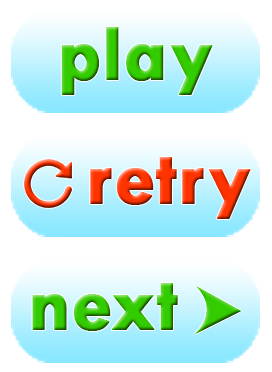
<style>
.page{position:relative;width:272px;height:372px;background:#ffffff}
.page>*{position:absolute;margin:0}
.t1{font:80px "TwCenMT-Bold";font-weight:bold}
</style>
<div class="page">
<p class="t1" style="left:61px;top:27px;width:152px;height:68px">play</p>
<p class="t1" style="left:90px;top:157px;width:161px;height:62px">retry</p>
<p class="t1" style="left:32px;top:283px;width:146px;height:48px">next</p>
</div>
